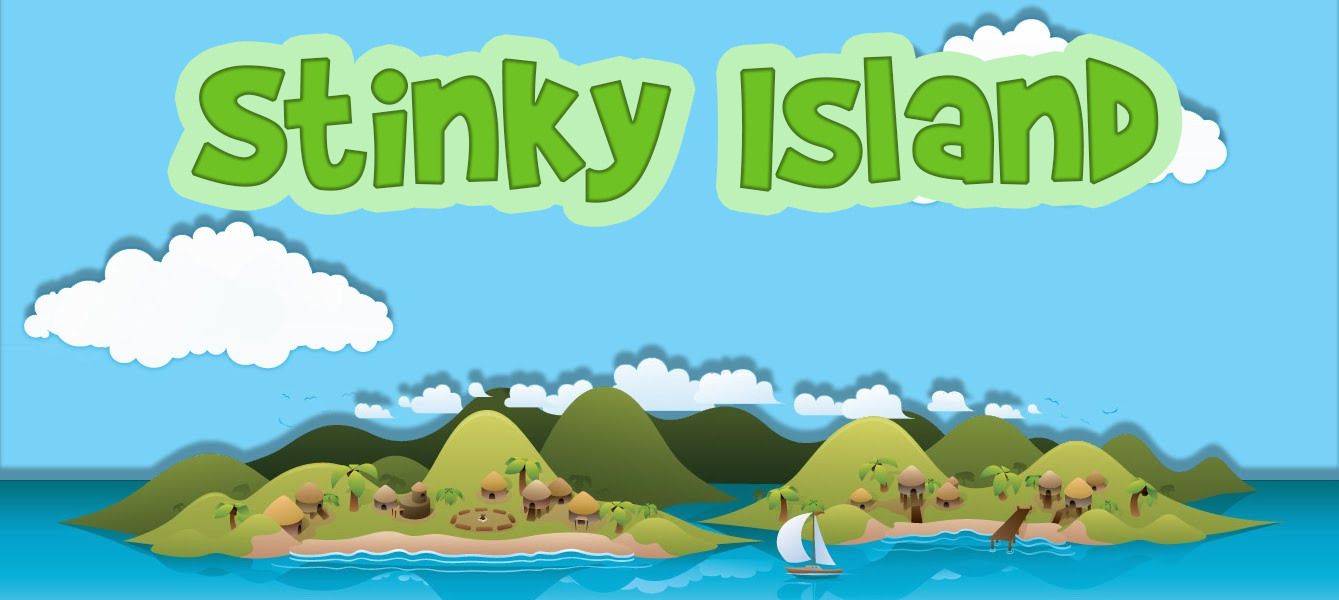
<style>
.page{position:relative;width:1339px;height:600px;background:#78d2f7}
.page>*{position:absolute;margin:0}
.t1{font:200px "BradyBunchRemastered";color:#6ec223;font-weight:bold}
</style>
<div class="page">
<p class="t1" style="left:191px;top:56px;width:968px;height:147px">Stinky Island</p>
</div>
